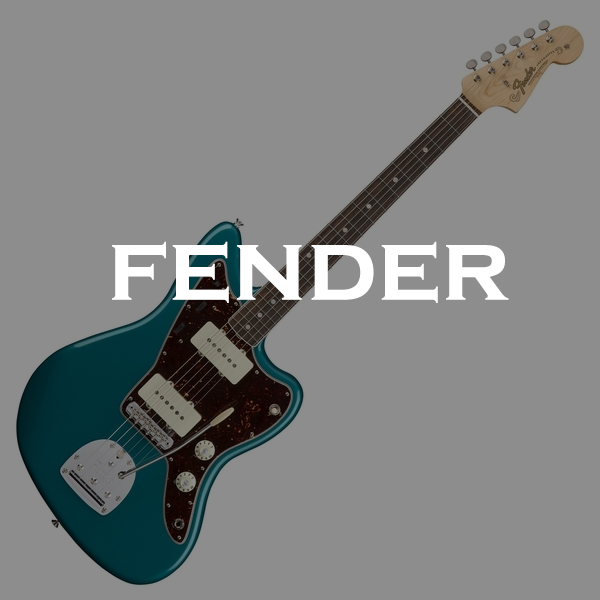
<style>
.page{position:relative;width:600px;height:600px;background:#8d8d8d}
.page>*{position:absolute;margin:0}
.t1{font:100px "CopperplateGothic-Bold";color:#ffffff}
</style>
<div class="page">
<p class="t1" style="left:112px;top:241px;width:397px;height:62px">fender</p>
</div>
